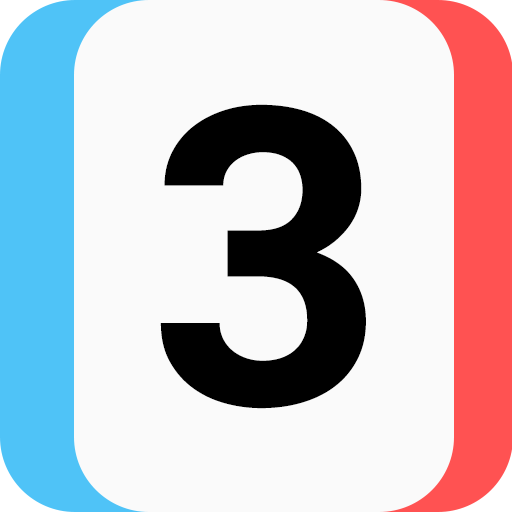
<style>
.page{position:relative;width:512px;height:512px;background:#fafafa}
.page>*{position:absolute;margin:0}
.t1{font:415px "Roboto-Bold";letter-spacing:-0.2em;color:#000000}
</style>
<div class="page">
<p class="t1" style="left:160px;top:104px;width:206px;height:305px">3</p>
</div>
